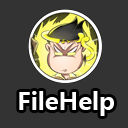
<style>
.page{position:relative;width:128px;height:128px;background:#333333}
.page>*{position:absolute;margin:0}
.t1{font:23.8px "MicrosoftYaHei-Bold";color:#ffffff}
</style>
<div class="page">
<p class="t1" style="left:19px;top:91px;width:95px;height:25px">FileHelp</p>
</div>
